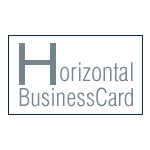
<style>
.page{position:relative;width:150px;height:150px;background:#ffffff}
.page>*{position:absolute;margin:0}
.t1{font:58px "Swiss721BT-RomanExtended";color:#76858d}
.t2{font:25px "Swiss721BT-LightCondensed";color:#76858d}
.t3{font:24px "Swiss721BT-LightCondensed";color:#76858d}
</style>
<div class="page">
<p class="t1" style="left:19px;top:43px;width:37px;height:42px">H</p>
<p class="t2" style="left:60px;top:62px;width:73px;height:20px">orizontal</p>
<p class="t3" style="left:19px;top:87px;width:114px;height:20px">BusinessCard</p>
</div>
